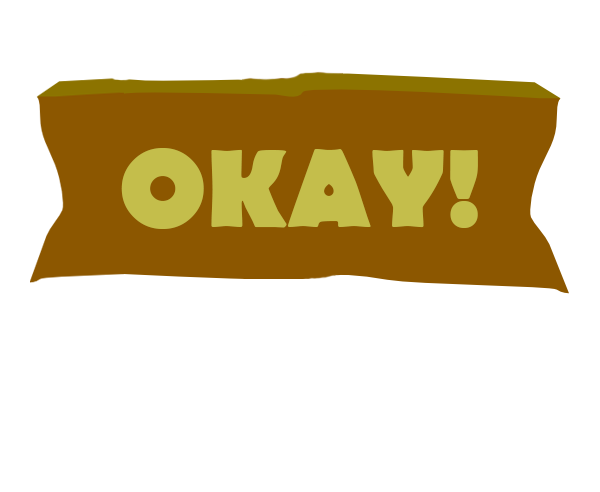
<style>
.page{position:relative;width:600px;height:492px;background:#ffffff}
.page>*{position:absolute;margin:0}
.t1{font:113.4px "BerlinSansFB-Bold";color:#c4be4b}
</style>
<div class="page">
<p class="t1" style="left:121px;top:148px;width:357px;height:81px">OKAY!</p>
</div>
